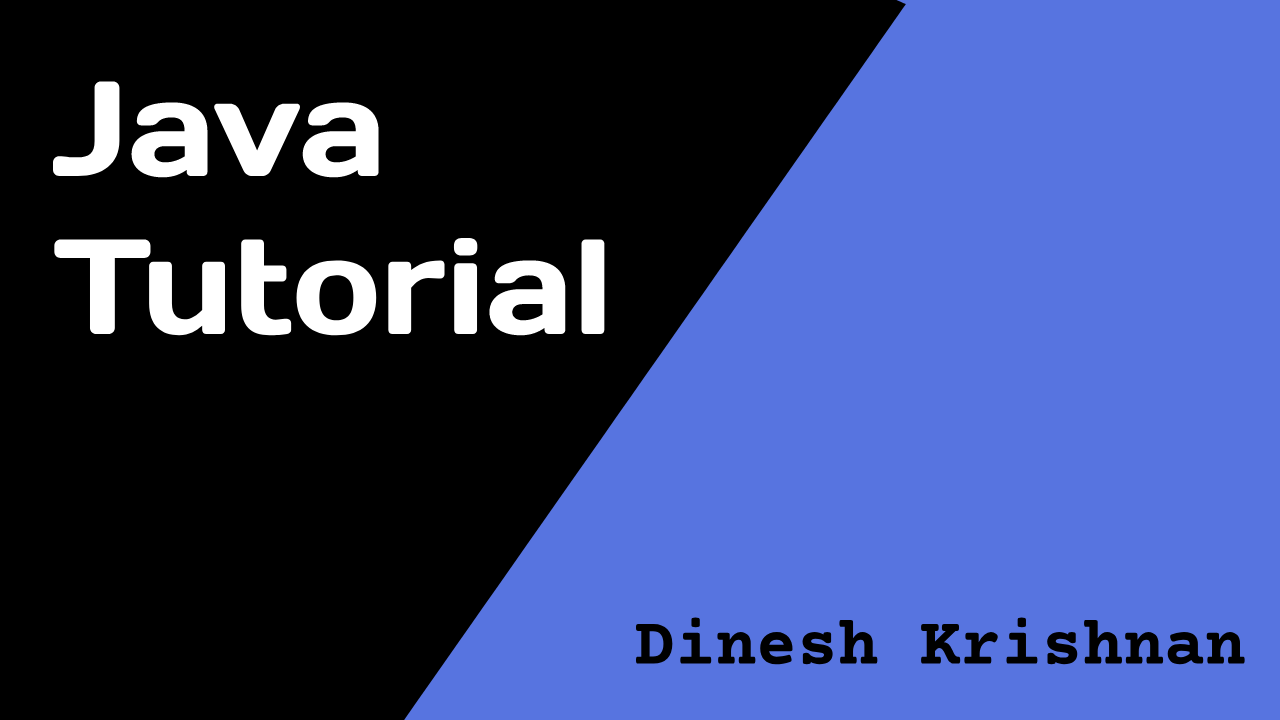
<style>
.page{position:relative;width:1280px;height:720px;background:#000000}
.page>*{position:absolute;margin:0}
.t1{font:135px "Days";color:#ffffff}
.t2{font:68px "CourierPrime-Bold";color:#000000}
.t3{font:68px "CourierPrime";color:#000000}
</style>
<div class="page">
<p class="t1" style="left:53px;top:81px;width:552px;height:255px">Java<br>Tutorial</p>
<p class="t2" style="left:635px;top:617px;width:610px;height:48px"><span class="t3"><br></span>Dinesh Krishnan</p>
</div>
